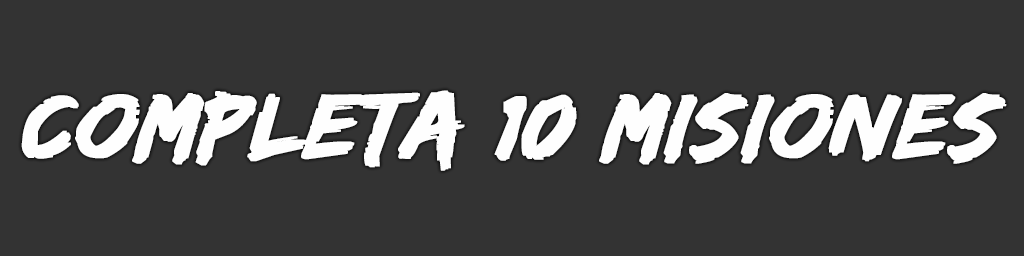
<style>
.page{position:relative;width:1024px;height:256px;background:#333333}
.page>*{position:absolute;margin:0}
.t1{font:95px "EdoSZ";color:#fefefe;font-weight:bold;font-style:italic;scale:1.04 1}
</style>
<div class="page">
<p class="t1" style="left:21px;top:90px;width:986px;height:81px">completa 10 misiones</p>
</div>
